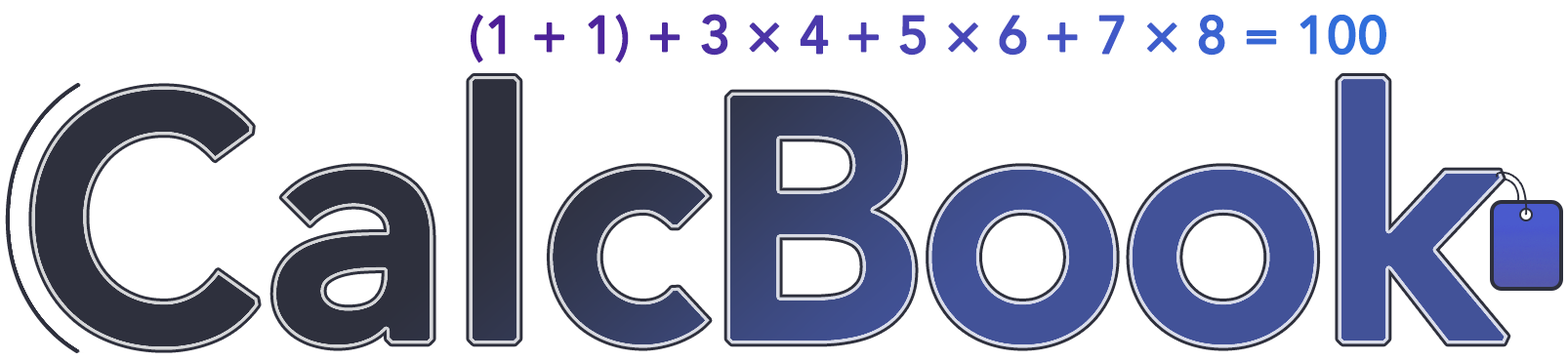
<style>
.page{position:relative;width:1568px;height:361px;background:#ffffff}
.page>*{position:absolute;margin:0}
.t1{font:52.7px "Avenir-Medium";font-weight:bold}
.t2{font:341.7px "Avenir-Heavy";letter-spacing:-0.05em;font-weight:bold}
.t3{font:341.7px "Avenir-Heavy";font-weight:bold}
.t4{font:341.7px "Avenir-Heavy";letter-spacing:-0.025em;font-weight:bold}
</style>
<div class="page">
<p class="t1" style="left:471px;top:14px;width:915px;height:49px">(1 + 1) + 3 × 4 + 5 × 6 + 7 × 8 = 100</p>
<p class="t2" style="left:31px;top:76px;width:1477px;height:275px"><span class="t3">C</span><span class="t4">alc</span>Book</p>
</div>
